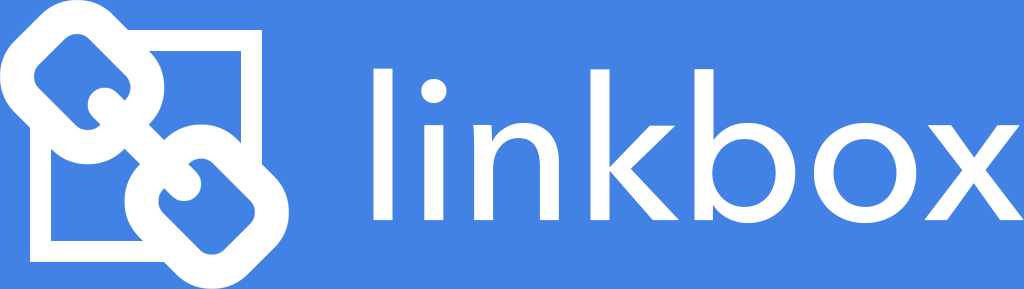
<style>
.page{position:relative;width:1024px;height:289px;background:#4182e4}
.page>*{position:absolute;margin:0}
.t1{font:200px "AvenirNext-Medium";letter-spacing:-0.005em;color:#ffffff}
</style>
<div class="page">
<p class="t1" style="left:373px;top:68px;width:651px;height:155px">linkbox</p>
</div>
